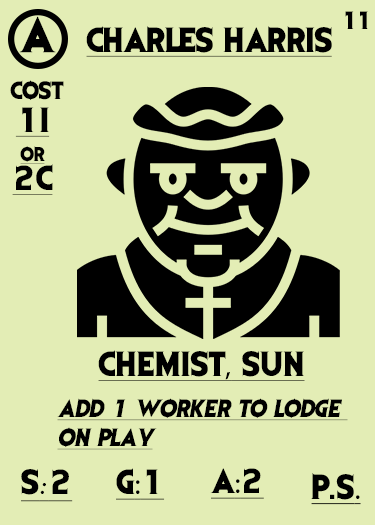
<style>
.page{position:relative;width:375px;height:525px;background:#e3edb5}
.page>*{position:absolute;margin:0}
.t1{font:41.7px "EvilDead";letter-spacing:-0.05em;color:#000000}
.t2{font:20.8px "EvilDead";letter-spacing:-0.1em;color:#000000}
.t3{font:29.2px "EvilDead";letter-spacing:-0.025em;color:#000000;text-decoration:underline}
.t4{font:20.8px "EvilDead";color:#000000}
.t5{font:29.2px/29.2px "EvilDead";color:#000000;text-decoration:underline}
.t6{font:16.7px/29.2px "EvilDead";color:#000000;text-decoration:underline}
.t7{font:29.2px "EvilDead";color:#000000;text-decoration:underline}
.t8{font:29.2px "MyriadPro-Regular";color:#000000;text-decoration:underline}
.t9{font:20.8px/29.2px "EvilDead";color:#000000;font-style:italic;text-decoration:underline}
.t10{font:29.2px "Fadli-Script";color:#000000;text-decoration:underline}
</style>
<div class="page">
<p class="t1" style="left:19px;top:16px;width:37px;height:37px">A</p>
<p class="t2" style="left:345px;top:11px;width:23px;height:18px">11</p>
<p class="t3" style="left:86px;top:26px;width:246px;height:31px">CHARLES HARRIS</p>
<p class="t4" style="left:10px;top:80px;width:54px;height:20px">COST</p>
<p class="t5" style="left:12px;top:107px;width:41px;height:88px;text-align:center">1I<br><span class="t6">or<br></span>2C</p>
<p class="t7" style="left:98px;top:350px;width:207px;height:31px">CHEMIST<span class="t8">,</span> SUN</p>
<p class="t9" style="left:57px;top:398px;width:291px;height:52px">Add 1 worker to lodge <br>ON PLAY</p>
<p class="t7" style="left:21px;top:469px;width:52px;height:33px">S<span class="t10">:</span>2</p>
<p class="t7" style="left:116px;top:468px;width:49px;height:32px">G<span class="t8">:</span>1</p>
<p class="t7" style="left:210px;top:468px;width:54px;height:31px">A<span class="t8">:</span>2</p>
<p class="t7" style="left:311px;top:473px;width:50px;height:32px">P.S<span class="t8">.</span></p>
</div>
